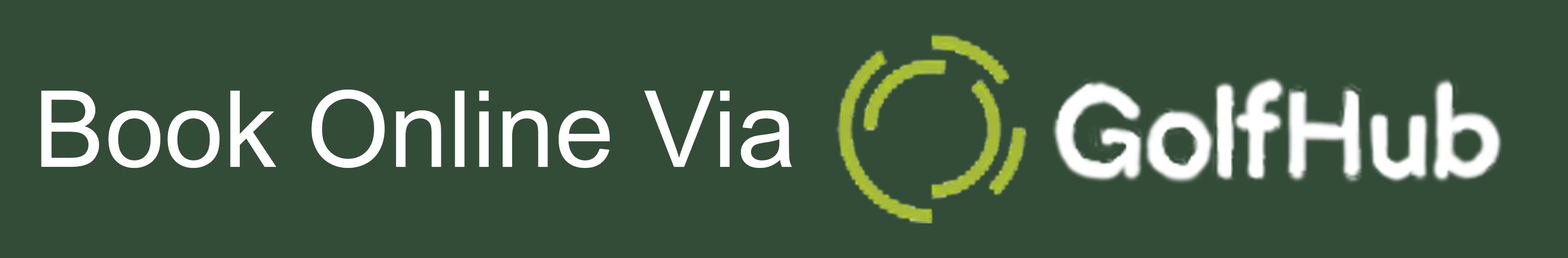
<style>
.page{position:relative;width:1568px;height:258px;background:#334c38}
.page>*{position:absolute;margin:0}
.t1{font:106.6px "ArialMT";color:#ffffff}
</style>
<div class="page">
<p class="t1" style="left:41px;top:90px;width:751px;height:78px">Book Online Via</p>
</div>
